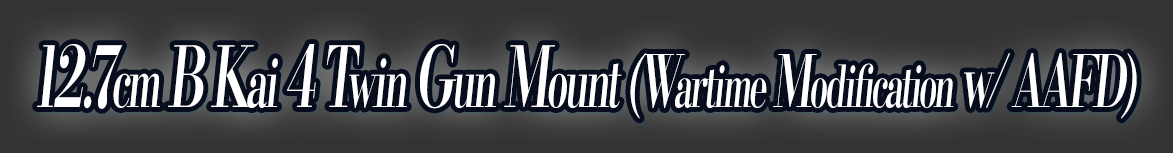
<style>
.page{position:relative;width:1173px;height:153px}
.page>*{position:absolute;margin:0}
.t1{font:57.6px "KochoStd-Heavy";letter-spacing:-0.08em;color:#ffffff;font-style:italic;scale:0.58 1}
.t2{font:84px "KochoStd-Heavy";letter-spacing:-0.08em;color:#ffffff;font-style:italic;scale:0.58 1}
.t3{font:67.2px "KochoStd-Heavy";letter-spacing:-0.08em;color:#ffffff;font-style:italic;scale:0.58 1}
.t4{font:72px "KochoStd-Heavy";letter-spacing:-0.08em;color:#ffffff;font-style:italic;scale:0.58 1}
</style>
<div class="page">
<p class="t1" style="left:37px;top:44px;width:1100px;height:75px"><span class="t2">12.7</span><span class="t3">cm </span><span class="t2">B K</span><span class="t3">ai </span><span class="t2">4 T</span><span class="t3">win </span><span class="t2">G</span><span class="t3">un </span><span class="t2">M</span><span class="t3">ount </span><span class="t4">(W</span>artime <span class="t4">M</span>odification <span class="t4">w/ AAFD)</span></p>
</div>
